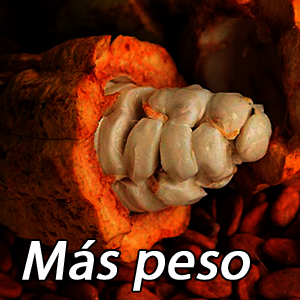
<style>
.page{position:relative;width:300px;height:300px}
.page>*{position:absolute;margin:0}
.t1{font:55.6px "MyriadPro-Regular";color:#ffffff;font-weight:bold;font-style:italic}
</style>
<div class="page">
<p class="t1" style="left:22px;top:240px;width:228px;height:51px">Más peso</p>
</div>
